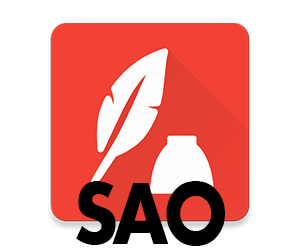
<style>
.page{position:relative;width:300px;height:250px;background:#ffffff}
.page>*{position:absolute;margin:0}
.t1{font:91px "Aharoni-Bold";letter-spacing:-0.08em;color:#000000;scale:0.88 1}
</style>
<div class="page">
<p class="t1" style="left:76px;top:181px;width:149px;height:65px">SAO</p>
</div>
